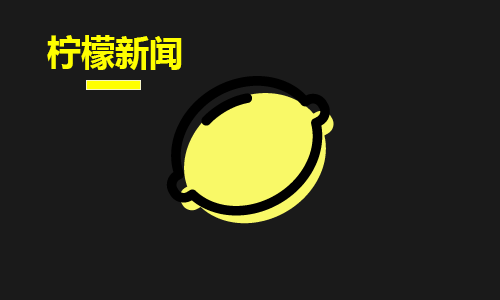
<style>
.page{position:relative;width:500px;height:300px;background:#1a1a1a}
.page>*{position:absolute;margin:0}
.t1{font:36px "MicrosoftYaHeiUI-Bold";color:#ffff00;scale:0.95 1}
</style>
<div class="page">
<p class="t1" style="left:47px;top:35px;width:135px;height:35px">柠檬新闻</p>
</div>
